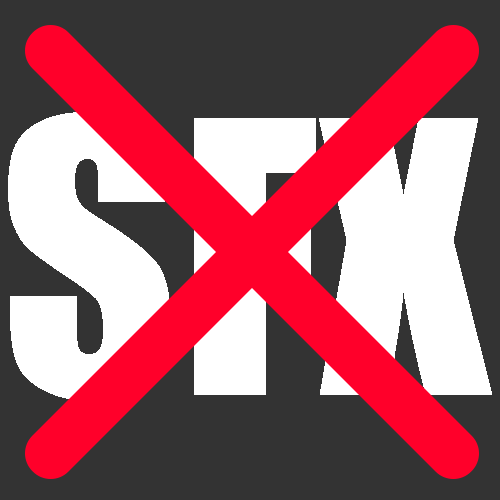
<style>
.page{position:relative;width:500px;height:500px;background:#333333}
.page>*{position:absolute;margin:0}
.t1{font:350px "Impact";color:#ffffff}
</style>
<div class="page">
<p class="t1" style="left:8px;top:112px;width:484px;height:289px">SFX</p>
</div>
